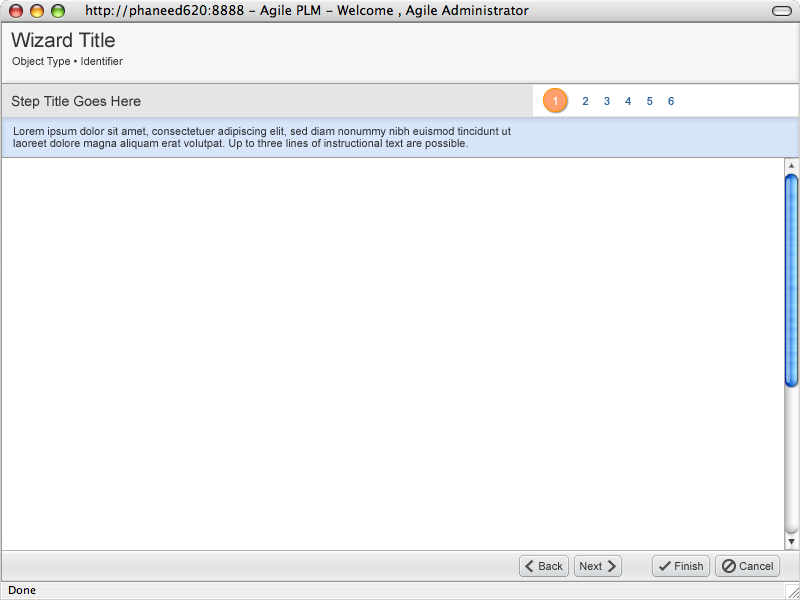
<style>
.page{position:relative;width:800px;height:600px;background:#ffffff}
.page>*{position:absolute;margin:0}
.t1{font:20px "ArialMT";color:#333333}
.t2{font:11px "ArialMT";color:#333333}
.t3{font:14px "ArialMT";color:#333333}
.t4{font:11px "ArialMT";color:#ffffff}
.t5{font:11px "ArialMT";color:#336699}
.t6{font:11px/12px "ArialMT";color:#333333}
</style>
<div class="page">
<p class="t1" style="left:11px;top:32px;width:104px;height:16px">Wizard Title</p>
<p class="t2" style="left:12px;top:57px;width:111px;height:11px">Object Type • Identifier</p>
<p class="t3" style="left:11px;top:95px;width:130px;height:14px">Step Title Goes Here</p>
<p class="t4" style="left:553px;top:96px;width:4px;height:9px">1</p>
<p class="t5" style="left:582px;top:96px;width:92px;height:10px">2     3     4     5     6</p>
<p class="t6" style="left:13px;top:127px;width:498px;height:23px">Lorem ipsum dolor sit amet, consectetuer adipiscing elit, sed diam nonummy nibh euismod tincidunt ut <br>laoreet dolore magna aliquam erat volutpat. Up to three lines of instructional text are possible.</p>
<p class="t2" style="left:539px;top:562px;width:24px;height:8px">Back</p>
<p class="t2" style="left:580px;top:562px;width:22px;height:8px">Next</p>
<p class="t2" style="left:675px;top:562px;width:28px;height:8px">Finish</p>
<p class="t2" style="left:739px;top:562px;width:34px;height:8px">Cancel</p>
</div>
